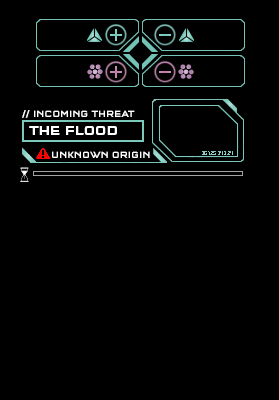
<style>
.page{position:relative;width:279px;height:400px;background:#000000}
.page>*{position:absolute;margin:0}
.t1{font:9.3px "QTypeSquare-Medium";color:#ffffff}
.t2{font:13.3px "QTypeSquare-Medium";color:#ffffff}
</style>
<div class="page">
<p class="t1" style="left:22px;top:110px;width:113px;height:8px">// INCOMING THREAT</p>
<p class="t2" style="left:29px;top:126px;width:88px;height:9px">THE FLOOD</p>
<p class="t1" style="left:52px;top:151px;width:98px;height:7px">UNKNOWN ORIGIN</p>
</div>
